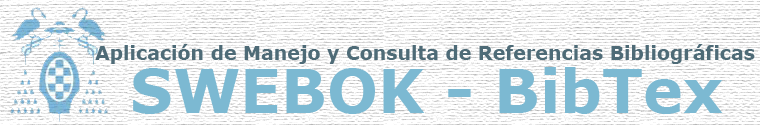
<style>
.page{position:relative;width:760px;height:125px;background:#ffffff}
.page>*{position:absolute;margin:0}
.t1{font:19px "Verdana-Bold";color:#4e6b77}
.t2{font:60px "Verdana-Bold";color:#7cb9d2}
</style>
<div class="page">
<p class="t1" style="left:95px;top:44px;width:660px;height:20px">Aplicación de Manejo y Consulta de Referencias Bibliográficas</p>
<p class="t2" style="left:133px;top:67px;width:590px;height:47px">SWEBOK - BibTex</p>
</div>
